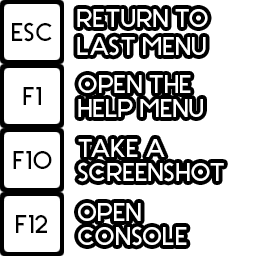
<style>
.page{position:relative;width:256px;height:256px;background:#ffffff}
.page>*{position:absolute;margin:0}
.t1{font:24px "Stark";color:#ffffff}
.t2{font:24px "Stark";color:#000000}
.t3{font:24px/24px "Stark";color:#ffffff}
</style>
<div class="page">
<p class="t1" style="left:77px;top:9px;width:131px;height:47px">RETURN TO<br>LAST MENU</p>
<p class="t2" style="left:12px;top:22px;width:40px;height:20px">ESC</p>
<p class="t3" style="left:78px;top:75px;width:125px;height:42px">OPEN THE<br>HELP MENU</p>
<p class="t2" style="left:23px;top:87px;width:18px;height:18px">F1</p>
<p class="t3" style="left:78px;top:139px;width:146px;height:43px">TAKE A<br>SCREENSHOT</p>
<p class="t2" style="left:13px;top:151px;width:39px;height:18px">F10</p>
<p class="t3" style="left:78px;top:203px;width:109px;height:43px">OPEN<br>CONSOLE</p>
<p class="t2" style="left:16px;top:215px;width:31px;height:18px">F12</p>
</div>
